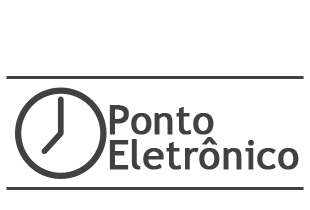
<style>
.page{position:relative;width:310px;height:210px;background:#ffffff}
.page>*{position:absolute;margin:0}
.t1{font:40px/34.4px "TrebuchetMS";color:#414141;font-weight:bold}
</style>
<div class="page">
<p class="t1" style="left:109px;top:105px;width:190px;height:65px">Ponto<br>Eletrônico</p>
</div>
